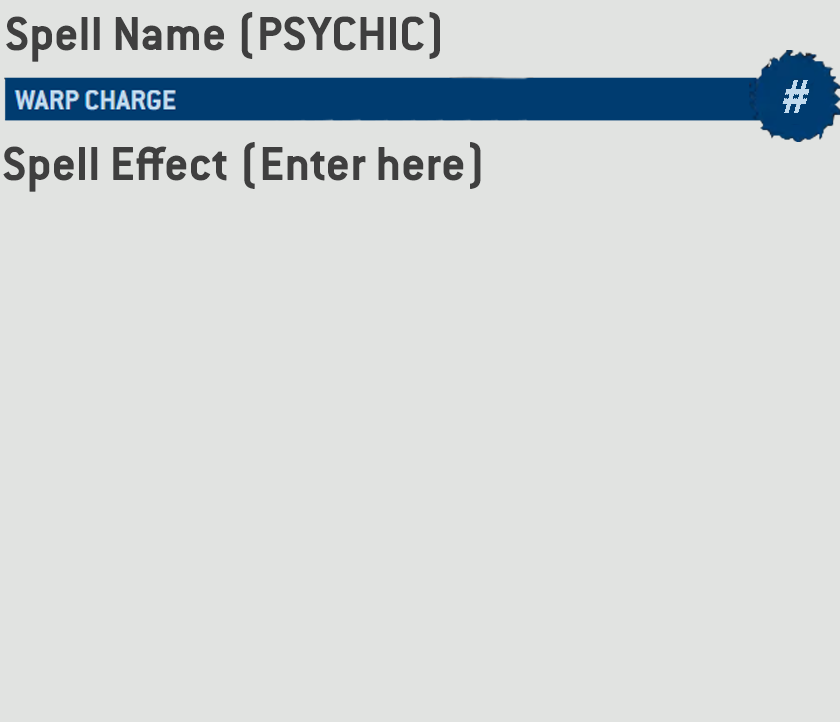
<style>
.page{position:relative;width:840px;height:722px;background:#e1e3e1}
.page>*{position:absolute;margin:0}
.t1{font:52.5px "ConduitITC-Bold";color:#3f3f3f}
</style>
<div class="page">
<p class="t1" style="left:6px;top:12px;width:434px;height:50px">Spell Name (PSYCHIC)</p>
<p class="t1" style="left:3px;top:142px;width:478px;height:50px">Spell Effect (Enter here)</p>
</div>
